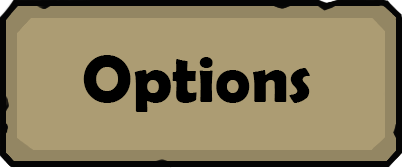
<style>
.page{position:relative;width:402px;height:168px;background:#ac9c73}
.page>*{position:absolute;margin:0}
.t1{font:66.7px "BerlinSansFBDemi-Bold";color:#000000}
</style>
<div class="page">
<p class="t1" style="left:83px;top:55px;width:227px;height:57px">Options</p>
</div>
